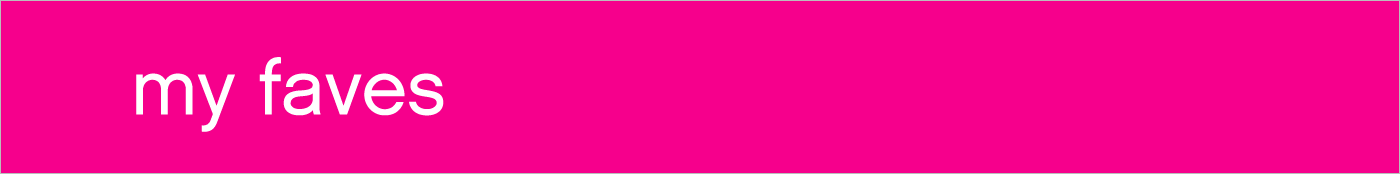
<style>
.page{position:relative;width:1400px;height:174px;background:#f6008c}
.page>*{position:absolute;margin:0}
.t1{font:77px "ChaletE-LondonSixty";color:#ffffff}
</style>
<div class="page">
<p class="t1" style="left:136px;top:57px;width:308px;height:75px">my faves</p>
</div>
